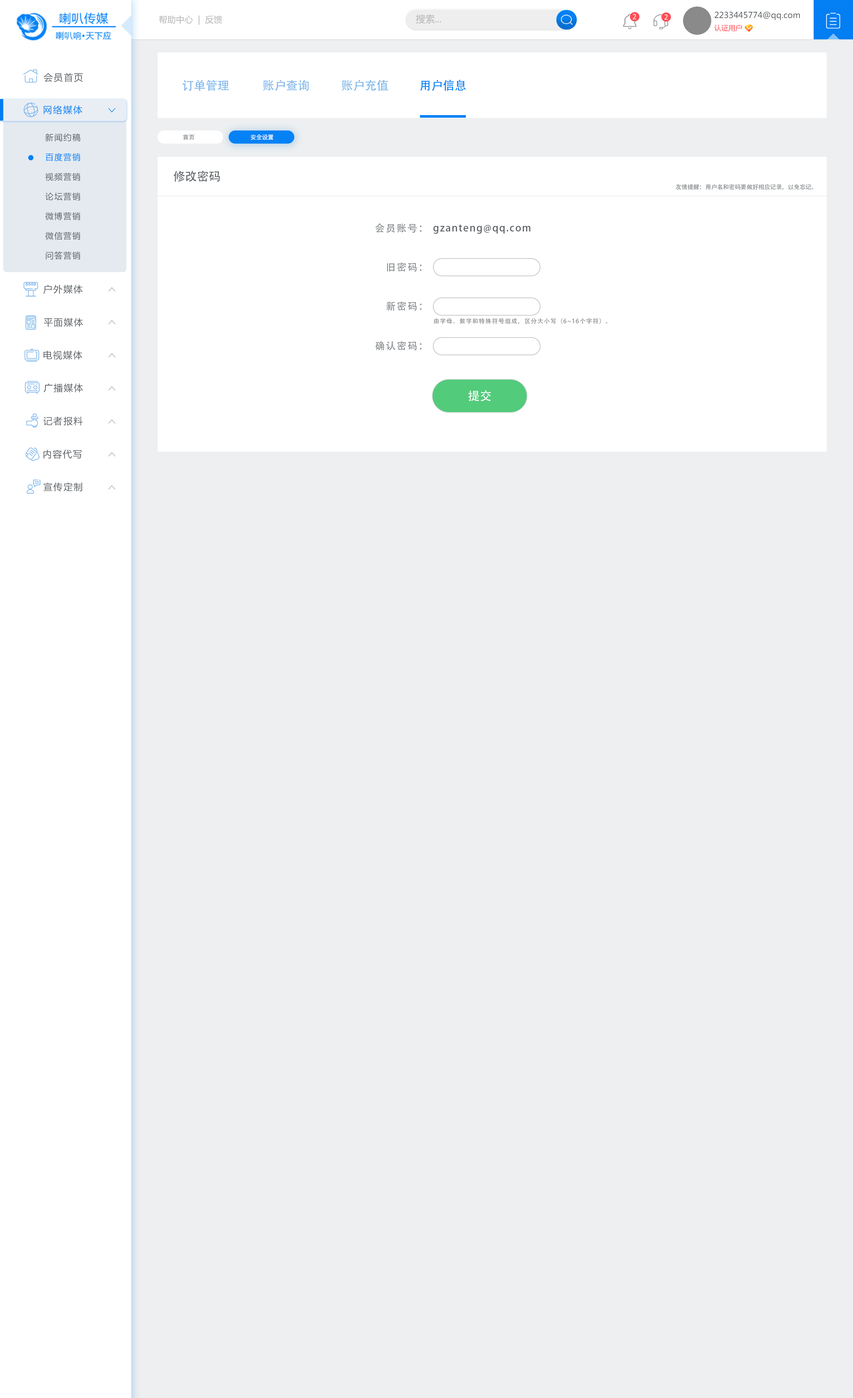
<style>
.page{position:relative;width:853px;height:1398px;background:#edeff0}
.page>*{position:absolute;margin:0}
.t1{font:8.6px "MicrosoftYaHei";color:#b4b4b4}
.t2{font:9.4px "MicrosoftYaHei";color:#b4b4b4}
.t3{font:6.9px "Tahoma";letter-spacing:0.1em;color:#ffffff;text-transform:uppercase}
.t4{font:8.2px/12.3px "MicrosoftYaHei";color:#5c6165}
.t5{font:7.1px/12.3px "MicrosoftYaHei";color:#fe4d55}
.t6{font:9.2px "MicrosoftYaHei";letter-spacing:0.1em;color:#5c6165}
.t7{font:11.8px "AdobeHeitiStd-Regular";color:#7db6eb}
.t8{font:11.8px "AdobeHeitiStd-Regular";color:#0582f5}
.t9{font:9.2px "MicrosoftYaHei";letter-spacing:0.1em;color:#0582f5}
.t10{font:8.2px/19.7px "MicrosoftYaHei";letter-spacing:0.1em;color:#5c6165}
.t11{font:8.2px/19.7px "MicrosoftYaHei";letter-spacing:0.1em;color:#0381f5}
.t12{font:5.9px "AdobeHeitiStd-Regular";color:#878b8e}
.t13{font:5.9px "AdobeHeitiStd-Regular";color:#fefefe}
.t14{font:11.8px "AdobeHeitiStd-Regular";color:#5c6165}
.t15{font:9.8px "AdobeHeitiStd-Regular";letter-spacing:0.1em;color:#878b8e}
.t16{font:9.8px "AdobeHeitiStd-Regular";letter-spacing:0.1em;color:#5c6165}
.t17{font:5.9px "AdobeHeitiStd-Regular";letter-spacing:0.1em;color:#878b8e}
.t18{font:11.8px "AdobeHeitiStd-Regular";color:#fefefe}
</style>
<div class="page">
<p class="t1" style="left:159px;top:15px;width:63px;height:10px">帮助中心  |  反馈</p>
<p class="t2" style="left:416px;top:14px;width:25px;height:10px">搜索...</p>
<p class="t3" style="left:633px;top:14px;width:3px;height:5px">2</p>
<p class="t3" style="left:664px;top:14px;width:4px;height:6px">2</p>
<p class="t4" style="left:714px;top:11px;width:86px;height:20px">2233445774@qq.com<br><span class="t5">认证用户</span></p>
<p class="t6" style="left:44px;top:73px;width:39px;height:9px">会员首页</p>
<p class="t7" style="left:182px;top:80px;width:47px;height:11px">订单管理</p>
<p class="t7" style="left:263px;top:80px;width:46px;height:11px">账户查询</p>
<p class="t7" style="left:341px;top:80px;width:47px;height:11px">账户充值</p>
<p class="t8" style="left:420px;top:80px;width:46px;height:11px">用户信息</p>
<p class="t9" style="left:44px;top:105px;width:38px;height:9px">网络媒体</p>
<p class="t10" style="left:45px;top:133px;width:35px;height:127px">新闻约稿<br><span class="t11">百度营销<br></span>视频营销<br>论坛营销<br>微博营销<br>微信营销<br>问答营销</p>
<p class="t12" style="left:183px;top:134px;width:11px;height:6px">首页</p>
<p class="t13" style="left:251px;top:134px;width:23px;height:6px">安全设置</p>
<p class="t14" style="left:173px;top:171px;width:47px;height:11px">修改密码</p>
<p class="t12" style="left:676px;top:184px;width:137px;height:6px">友情提醒：用户名和密码要做好相应记录，以免忘记。</p>
<p class="t15" style="left:375px;top:223px;width:46px;height:10px">会员账号：</p>
<p class="t16" style="left:433px;top:225px;width:97px;height:9px">gzanteng@qq.com</p>
<p class="t15" style="left:387px;top:262px;width:34px;height:10px">旧密码：</p>
<p class="t6" style="left:43px;top:285px;width:40px;height:9px">户外媒体</p>
<p class="t15" style="left:386px;top:301px;width:35px;height:10px">新密码：</p>
<p class="t6" style="left:44px;top:318px;width:39px;height:9px">平面媒体</p>
<p class="t17" style="left:434px;top:318px;width:173px;height:6px">由字母、数字和特殊符号组成，区分大小写（6~16个字符）。</p>
<p class="t15" style="left:375px;top:341px;width:46px;height:10px">确认密码：</p>
<p class="t6" style="left:43px;top:351px;width:39px;height:9px">电视媒体</p>
<p class="t6" style="left:44px;top:383px;width:39px;height:10px">广播媒体</p>
<p class="t18" style="left:468px;top:390px;width:23px;height:11px">提交</p>
<p class="t6" style="left:43px;top:417px;width:40px;height:9px">记者报料</p>
<p class="t6" style="left:43px;top:450px;width:39px;height:9px">内容代写</p>
<p class="t6" style="left:43px;top:482px;width:39px;height:10px">宣传定制</p>
</div>
